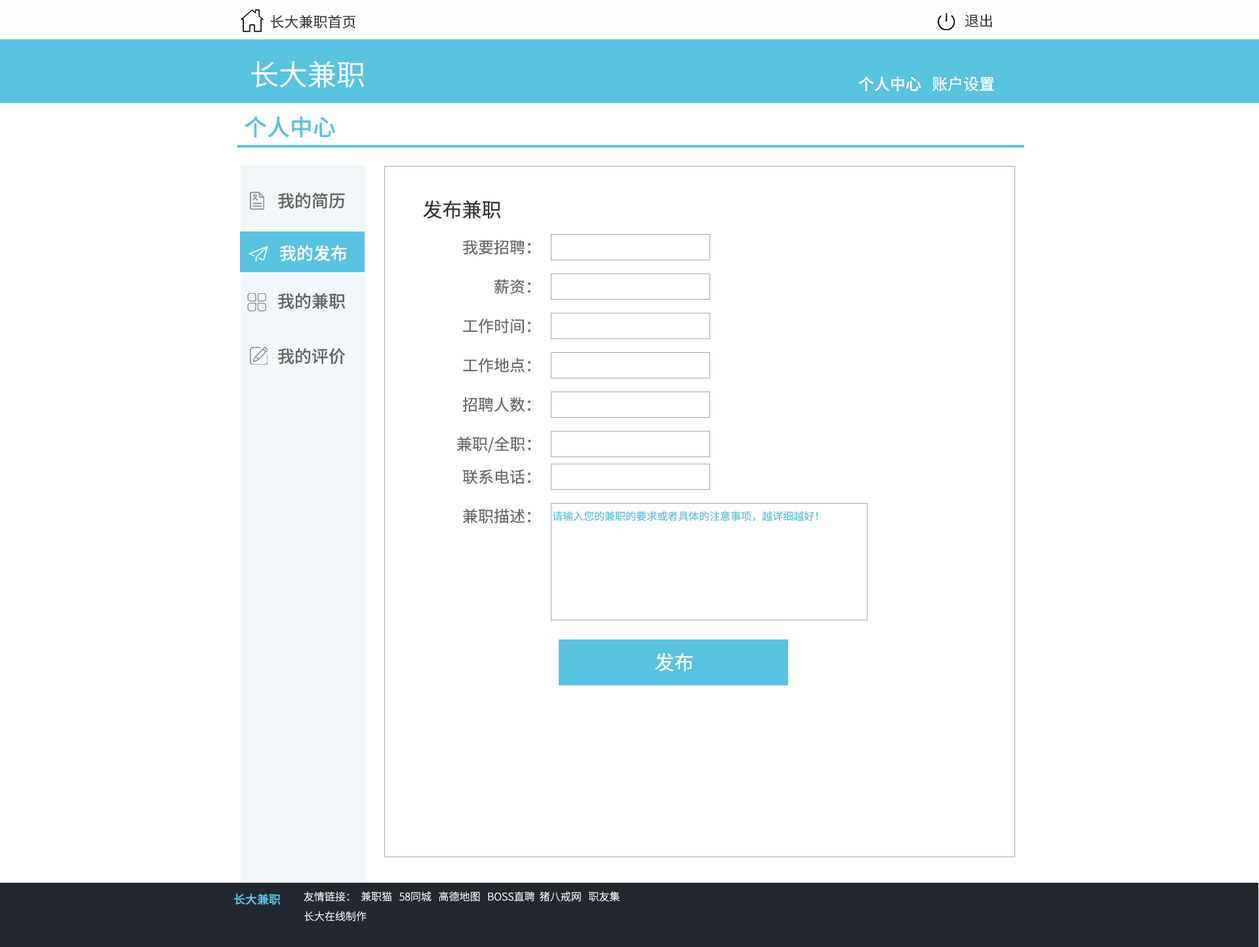
<style>
.page{position:relative;width:1259px;height:947px;background:#ffffff}
.page>*{position:absolute;margin:0}
.t1{font:14.4px "SourceHanSansCN-Normal";color:#333333}
.t2{font:28.9px "SourceHanSansCN-Normal";color:#ffffff}
.t3{font:15.7px "SourceHanSansCN-Medium";color:#ffffff}
.t4{font:15.7px "SourceHanSansCN-Regular";color:#ffffff}
.t5{font:23px "SourceHanSansCN-Medium";color:#57c3e0}
.t6{font:17.1px "SourceHanSansCN-Medium";color:#666666}
.t7{font:19.7px "SourceHanSansCN-Regular";color:#333333}
.t8{font:17.1px "SourceHanSansCN-Medium";color:#ffffff}
.t9{font:15.7px "SourceHanSansCN-Regular";color:#666666}
.t10{font:10.5px "SourceHanSansCN-Regular";color:#57c3e0}
.t11{font:19.7px "SourceHanSansCN-Regular";color:#ffffff}
.t12{font:11.8px "SourceHanSansCN-Medium";color:#57c3e0}
.t13{font:10.5px "SourceHanSansCN-Light";color:#ffffff}
</style>
<div class="page">
<p class="t1" style="left:270px;top:15px;width:85px;height:14px">长大兼职首页</p>
<p class="t1" style="left:965px;top:14px;width:27px;height:14px">退出</p>
<p class="t2" style="left:251px;top:61px;width:113px;height:27px">长大兼职</p>
<p class="t3" style="left:858px;top:76px;width:136px;height:15px">个人中心<span class="t4">   账户设置</span></p>
<p class="t5" style="left:245px;top:116px;width:90px;height:22px">个人中心</p>
<p class="t6" style="left:278px;top:192px;width:67px;height:17px">我的简历</p>
<p class="t7" style="left:423px;top:200px;width:78px;height:19px">发布兼职</p>
<p class="t8" style="left:280px;top:245px;width:67px;height:17px">我的发布</p>
<p class="t9" style="left:463px;top:239px;width:68px;height:15px">我要招聘：</p>
<p class="t9" style="left:494px;top:279px;width:37px;height:15px">薪资：</p>
<p class="t6" style="left:278px;top:292px;width:67px;height:18px">我的兼职</p>
<p class="t9" style="left:463px;top:319px;width:68px;height:14px">工作时间：</p>
<p class="t6" style="left:278px;top:348px;width:68px;height:17px">我的评价</p>
<p class="t9" style="left:463px;top:357px;width:68px;height:16px">工作地点：</p>
<p class="t9" style="left:462px;top:397px;width:69px;height:15px">招聘人数：</p>
<p class="t9" style="left:457px;top:436px;width:74px;height:17px">兼职/全职：</p>
<p class="t9" style="left:462px;top:469px;width:69px;height:16px">联系电话：</p>
<p class="t9" style="left:463px;top:508px;width:68px;height:15px">兼职描述：</p>
<p class="t10" style="left:552px;top:511px;width:266px;height:10px">请输入您的兼职的要求或者具体的注意事项，越详细越好！</p>
<p class="t11" style="left:655px;top:653px;width:38px;height:19px">发布</p>
<p class="t12" style="left:234px;top:893px;width:47px;height:12px">长大兼职</p>
<p class="t13" style="left:304px;top:891px;width:316px;height:11px">友情链接：  兼职猫   58同城   高德地图   BOSS直聘  猪八戒网   职友集</p>
<p class="t13" style="left:304px;top:911px;width:63px;height:10px">长大在线制作</p>
</div>
